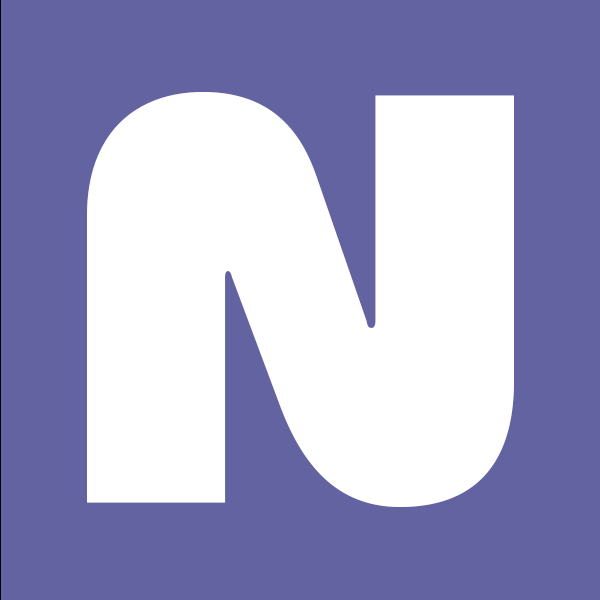
<style>
.page{position:relative;width:600px;height:600px;background:#6363a2}
.page>*{position:absolute;margin:0}
.t1{font:500px "VDL-LogoJrBlack-Black";color:#ffffff}
</style>
<div class="page">
<p class="t1" style="left:87px;top:92px;width:427px;height:415px">N</p>
</div>
